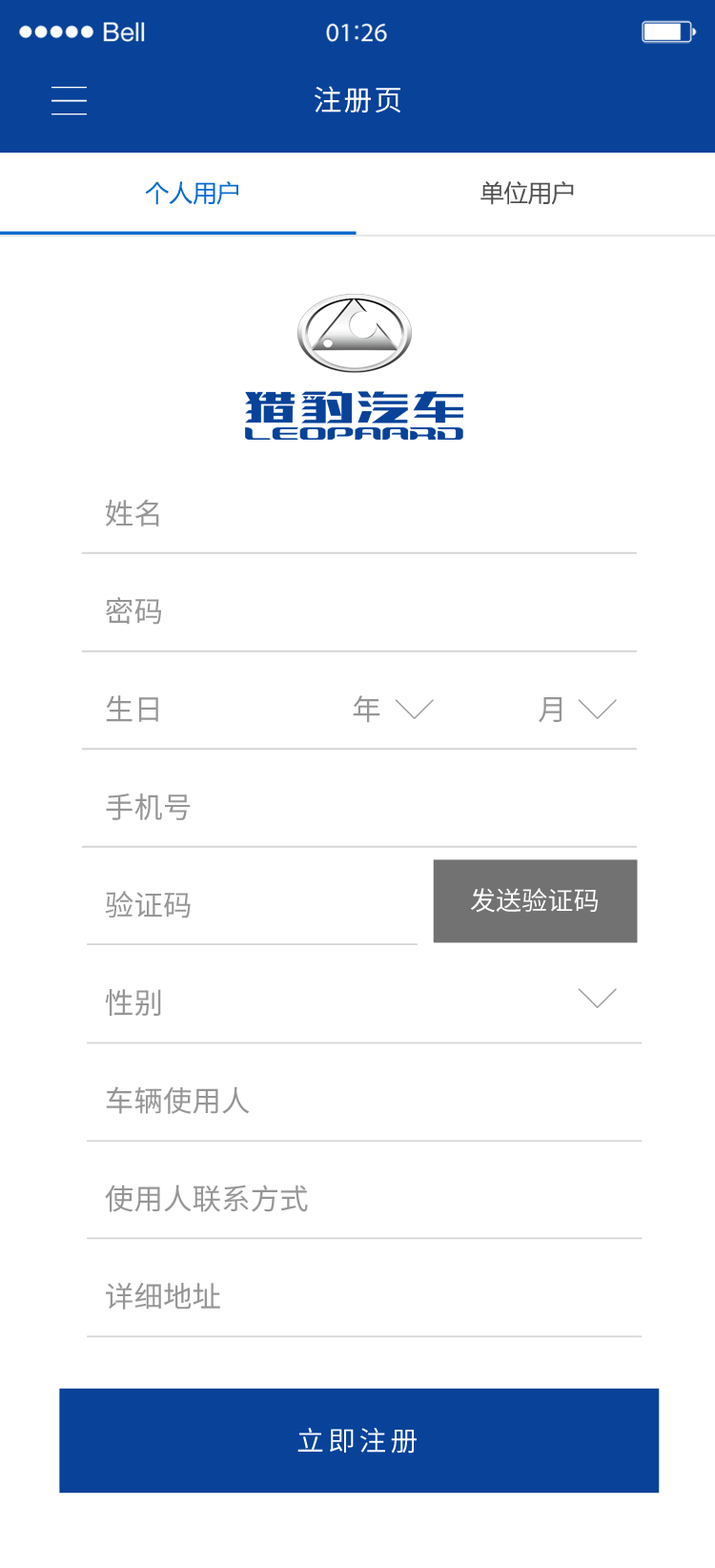
<style>
.page{position:relative;width:715px;height:1568px;background:#ffffff}
.page>*{position:absolute;margin:0}
.t1{font:28.6px "SourceHanSansCN-Regular";letter-spacing:0.06em;color:#ffffff}
.t2{font:23.8px "MicrosoftYaHei";color:#076bcf}
.t3{font:23.8px "MicrosoftYaHei";color:#515151}
.t4{font:29.1px/97.9px "SourceHanSansCN-Regular";color:#898989}
.t5{font:25.9px "SourceHanSansCN-Regular";color:#ffffff}
.t6{font:27.5px "SourceHanSansCN-Regular";letter-spacing:0.14em;color:#ffffff}
</style>
<div class="page">
<p class="t1" style="left:315px;top:86px;width:86px;height:27px">注册页</p>
<p class="t2" style="left:145px;top:181px;width:429px;height:24px">个人用户<span class="t3">                                  单位用户</span></p>
<p class="t4" style="left:105px;top:499px;width:457px;height:811px;opacity:0.89">姓名<br>密码<br>生日                             年                        月<br>手机号<br>验证码<br>性别<br>车辆使用人<br>使用人联系方式<br>详细地址</p>
<p class="t5" style="left:470px;top:888px;width:128px;height:25px">发送验证码</p>
<p class="t6" style="left:298px;top:1428px;width:119px;height:26px">立即注册</p>
</div>
